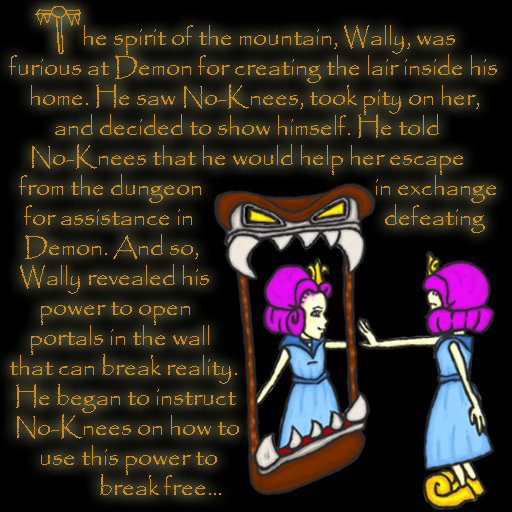
<style>
.page{position:relative;width:512px;height:512px}
.page>*{position:absolute;margin:0}
.t1{font:25px/30px "Papyrus-Regular";color:#d18b07}
</style>
<div class="page">
<p class="t1" style="left:9px;top:25px;width:488px;height:470px">he spirit of the mountain, Wally, was<br>furious at Demon for creating the lair inside his<br>    home. He saw No-Knees, took pity on her,<br>         and decided to show himself. He told<br>    No-Knees that he would help her escape<br>  from the dungeon                                  in exchange <br>   for assistance in                                      defeating<br>   Demon. And so,<br>  Wally revealed his<br>      power to open<br>    portals in the wall<br>that can break reality.<br> He began to instruct<br> No-Knees on how to<br>      use this power to<br>                  break free...</p>
<p class="t1" style="left:9px;top:25px;width:488px;height:470px">he spirit of the mountain, Wally, was<br>furious at Demon for creating the lair inside his<br>    home. He saw No-Knees, took pity on her,<br>         and decided to show himself. He told<br>    No-Knees that he would help her escape<br>  from the dungeon                                  in exchange <br>   for assistance in                                      defeating<br>   Demon. And so,<br>  Wally revealed his<br>      power to open<br>    portals in the wall<br>that can break reality.<br> He began to instruct<br> No-Knees on how to<br>      use this power to<br>                  break free...</p>
</div>
